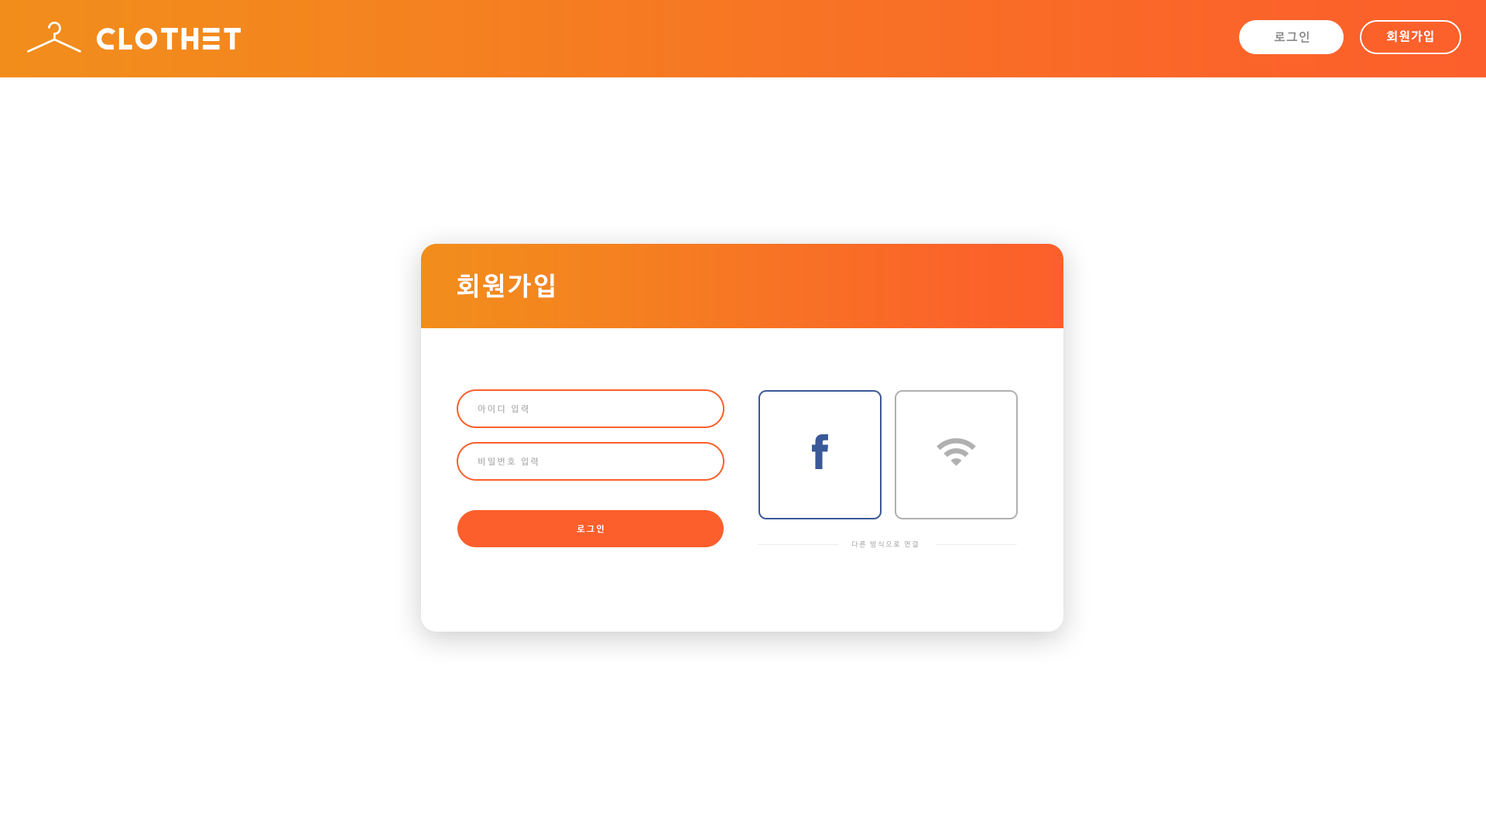
<style>
.page{position:relative;width:1486px;height:836px;background:#ffffff}
.page>*{position:absolute;margin:0}
.t1{font:12.4px "NanumBarunGothicBold";letter-spacing:0.1em;color:#8d8d8d}
.t2{font:12.4px "NanumBarunGothicBold";letter-spacing:0.1em;color:#ffffff}
.t3{font:25.8px "NanumBarunGothicBold";letter-spacing:0.1em;color:#ffffff}
.t4{font:9px "NanumBarunGothicBold";letter-spacing:0.2em;color:#b8b8b8}
.t5{font:9px "NanumBarunGothicBold";letter-spacing:0.2em;color:#ffffff}
.t6{font:7.1px "NanumBarunGothic";letter-spacing:0.2em}
</style>
<div class="page">
<p class="t1" style="left:1274px;top:31px;width:36px;height:12px">로그인</p>
<p class="t2" style="left:1387px;top:30px;width:47px;height:13px">회원가입</p>
<p class="t3" style="left:457px;top:273px;width:97px;height:25px">회원가입</p>
<p class="t4" style="left:478px;top:405px;width:50px;height:8px">아이디 입력</p>
<p class="t4" style="left:478px;top:457px;width:60px;height:9px">비밀번호 입력</p>
<p class="t5" style="left:577px;top:525px;width:27px;height:8px">로그인</p>
<p class="t6" style="left:852px;top:540px;width:66px;height:8px">다른 방식으로 연결</p>
</div>
